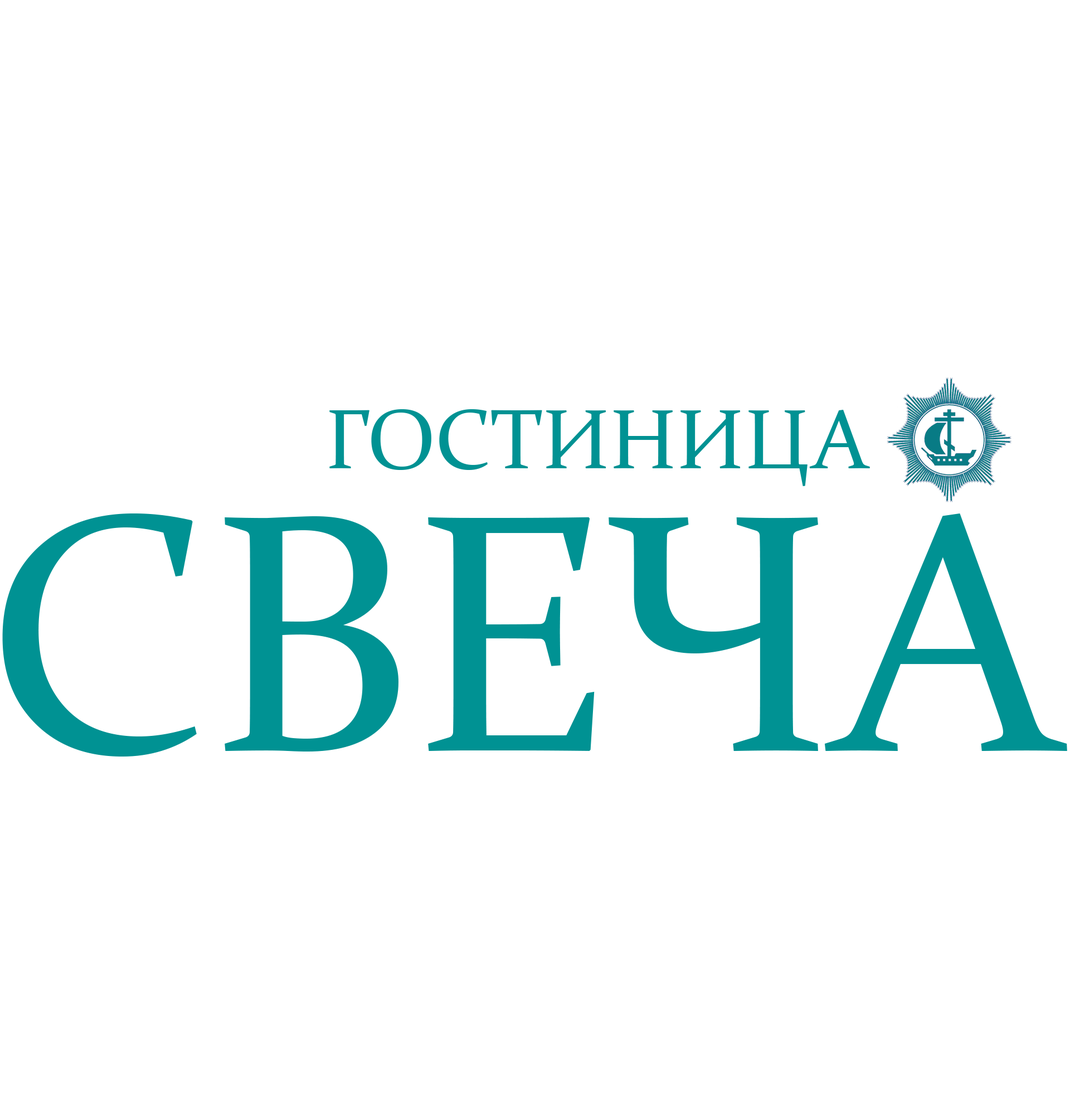
<style>
.page{position:relative;width:1070px;height:1115px;background:#ffffff}
.page>*{position:absolute;margin:0}
.t1{font:84.7px "Constantia";color:#009293}
.t2{font:341px "Constantia";color:#009293}
</style>
<div class="page">
<p class="t1" style="left:329px;top:409px;width:541px;height:77px">ГОСТИНИЦА</p>
<p class="t2" style="left:2px;top:513px;width:1065px;height:243px">СВЕЧА</p>
</div>
